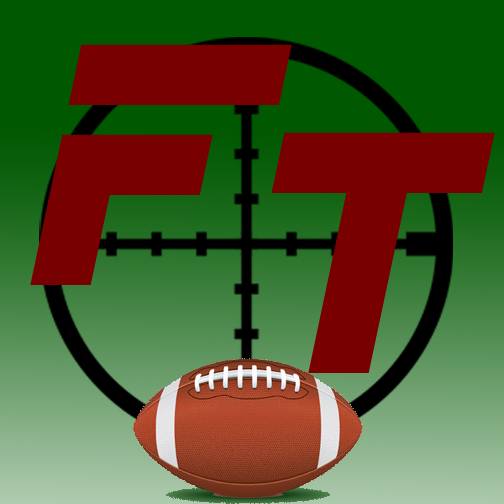
<style>
.page{position:relative;width:504px;height:504px}
.page>*{position:absolute;margin:0}
.t1{font:300px "ESP_Italic";color:#790000}
</style>
<div class="page">
<p class="t1" style="left:30px;top:44px;width:262px;height:241px">F</p>
<p class="t1" style="left:271px;top:132px;width:224px;height:241px">T</p>
</div>
